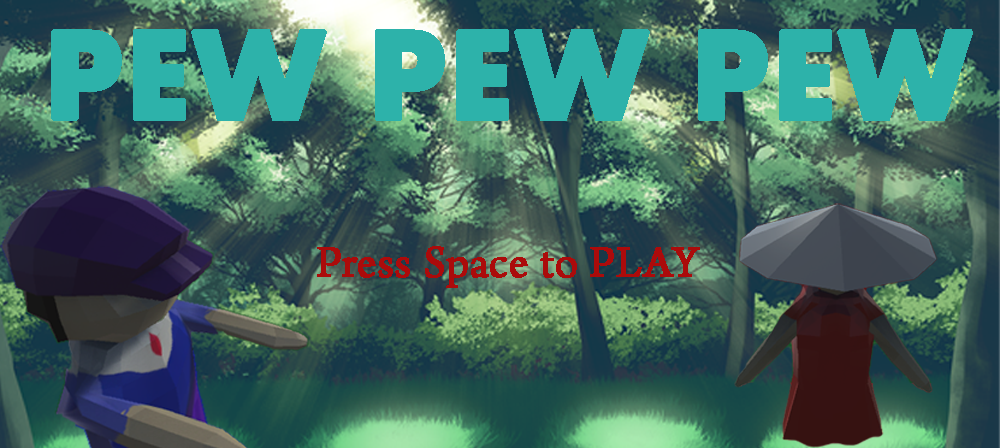
<style>
.page{position:relative;width:1000px;height:448px}
.page>*{position:absolute;margin:0}
.t1{font:130px "Aharoni-Bold";color:#2db2aa;font-weight:bold}
.t2{font:46.7px "ArnoPro-Regular";color:#ab0b0b;font-weight:bold}
</style>
<div class="page">
<p class="t1" style="left:51px;top:29px;width:922px;height:92px">PEW PEW PEW</p>
<p class="t2" style="left:317px;top:246px;width:383px;height:42px">Press Space to PLAY</p>
</div>
